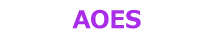
<style>
.page{position:relative;width:213px;height:36px;background:#ffffff}
.page>*{position:absolute;margin:0}
.t1{font:24px "MeiryoUI-Bold";color:#a92de8}
</style>
<div class="page">
<p class="t1" style="left:72px;top:9px;width:69px;height:20px">AOES</p>
</div>
